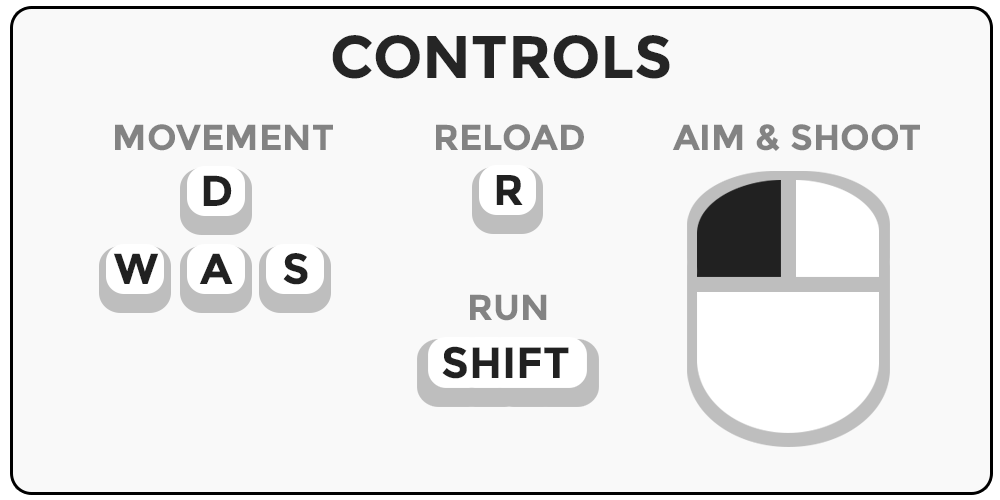
<style>
.page{position:relative;width:1000px;height:500px;background:#f9f9f9}
.page>*{position:absolute;margin:0}
.t1{font:60px "Montserrat-Bold";color:#252525}
.t2{font:36px "Montserrat-Bold";color:#838383}
.t3{font:43.2px "Montserrat-Bold";color:#212121}
.t4{font:43.1px "Montserrat-Bold";color:#212121}
.t5{font:43.7px "Montserrat-Bold";color:#212121}
</style>
<div class="page">
<p class="t1" style="left:332px;top:35px;width:338px;height:44px">CONTROLS</p>
<p class="t2" style="left:115px;top:124px;width:218px;height:27px">MOVEMENT</p>
<p class="t2" style="left:436px;top:124px;width:148px;height:27px">RELOAD</p>
<p class="t2" style="left:672px;top:124px;width:248px;height:27px">AIM &amp; SHOOT</p>
<p class="t3" style="left:203px;top:175px;width:29px;height:31px">D</p>
<p class="t4" style="left:496px;top:175px;width:27px;height:30px">R</p>
<p class="t3" style="left:113px;top:253px;width:46px;height:31px">W</p>
<p class="t3" style="left:199px;top:253px;width:34px;height:31px">A</p>
<p class="t3" style="left:283px;top:253px;width:25px;height:32px">S</p>
<p class="t2" style="left:470px;top:294px;width:77px;height:27px">RUN</p>
<p class="t5" style="left:442px;top:346px;width:127px;height:33px">SHIFT</p>
</div>
